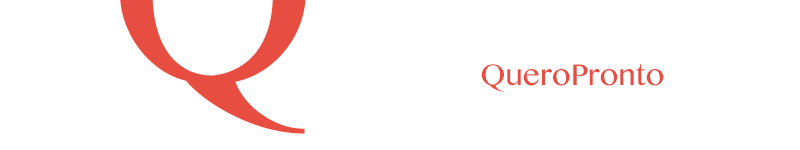
<style>
.page{position:relative;width:800px;height:150px;background:#ffffff}
.page>*{position:absolute;margin:0}
.t1{font:30px "MalayalamMN";color:#e74d40}
</style>
<div class="page">
<p class="t1" style="left:481px;top:64px;width:183px;height:28px">QueroPronto</p>
</div>
